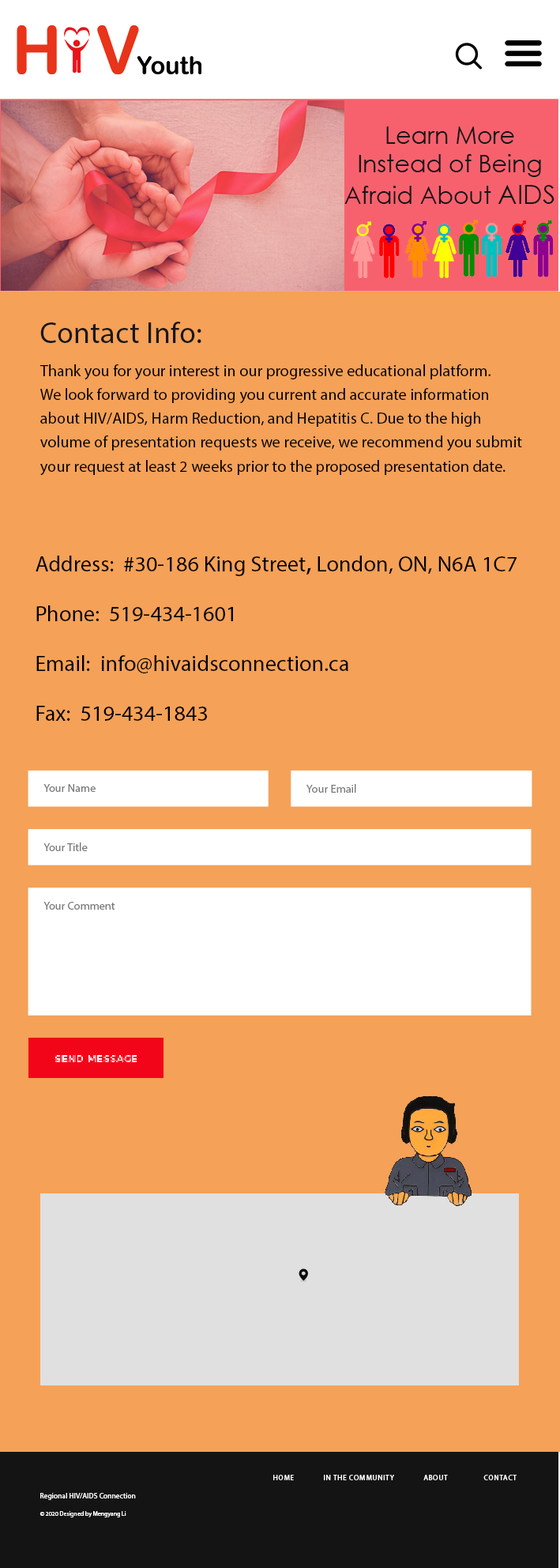
<style>
.page{position:relative;width:560px;height:1568px;background:#f5a158}
.page>*{position:absolute;margin:0}
.t1{font:23.7px "CenturyGothic";color:#161618}
.t2{font:26.2px "CenturyGothic";color:#161618}
.t3{font:29.9px "MyriadPro-Regular";letter-spacing:0.01em;color:#171717}
.t4{font:15.9px/23.9px "MyriadPro-Regular";letter-spacing:0.005em;color:#000000}
.t5{font:22.1px/49.7px "MyriadPro-Regular";letter-spacing:0.005em;color:#000000}
.t6{font:22.1px/49.7px "AdobeHeitiStd-Regular";letter-spacing:0.005em;color:#000000}
.t7{font:11.3px "MyriadPro-Regular";letter-spacing:0.005em;color:#787878}
.t8{font:11.3px "MyriadPro-Regular";letter-spacing:0.01em;color:#787878}
.t9{font:9px "Montserrat-Medium";letter-spacing:0.1em;color:#ffffff;text-transform:uppercase}
.t10{font:7.1px "MyriadPro-Regular";letter-spacing:0.1em;color:#fefefe;text-transform:uppercase}
.t11{font:7.4px "MyriadPro-Regular";letter-spacing:0.01em;color:#ffffff}
.t12{font:6.1px "MyriadPro-Regular";color:#ffffff}
</style>
<div class="page">
<p class="t1" style="left:345px;top:126px;width:210px;height:78px;text-align:center">Learn More Instead of Being Afraid About <span class="t2">AIDS</span></p>
<p class="t3" style="left:40px;top:322px;width:162px;height:21px">Contact Info:</p>
<p class="t4" style="left:40px;top:364px;width:482px;height:112px">Thank you for your interest in our progressive educational platform. <br>We look forward to providing you current and accurate information <br>about HIV/AIDS, Harm Reduction, and Hepatitis C. Due to the high <br>volume of presentation requests we receive, we recommend you submit <br>your request at least 2 weeks prior to the proposed presentation date.</p>
<p class="t5" style="left:36px;top:556px;width:481px;height:165px">Address:  #30-186 King Street<span class="t6">,</span> London, ON, N6A 1C7<br>Phone:  519-434-1601 <br>Email:  info@hivaidsconnection.ca<br>Fax:  519-434-1843</p>
<p class="t7" style="left:43px;top:784px;width:53px;height:8px">Your Name</p>
<p class="t8" style="left:307px;top:784px;width:49px;height:9px">Your Email</p>
<p class="t7" style="left:43px;top:842px;width:45px;height:9px">Your Title</p>
<p class="t7" style="left:43px;top:902px;width:72px;height:8px">Your Comment</p>
<p class="t9" style="left:55px;top:1055px;width:82px;height:7px">send message</p>
<p class="t10" style="left:273px;top:1475px;width:244px;height:5px">Home             IN THE COMMUNITY             About                Contact</p>
<p class="t11" style="left:40px;top:1493px;width:96px;height:7px">Regional HIV/AIDS Connection</p>
<p class="t12" style="left:40px;top:1511px;width:86px;height:6px">© 2020 Designed by Mengyang Li</p>
</div>
